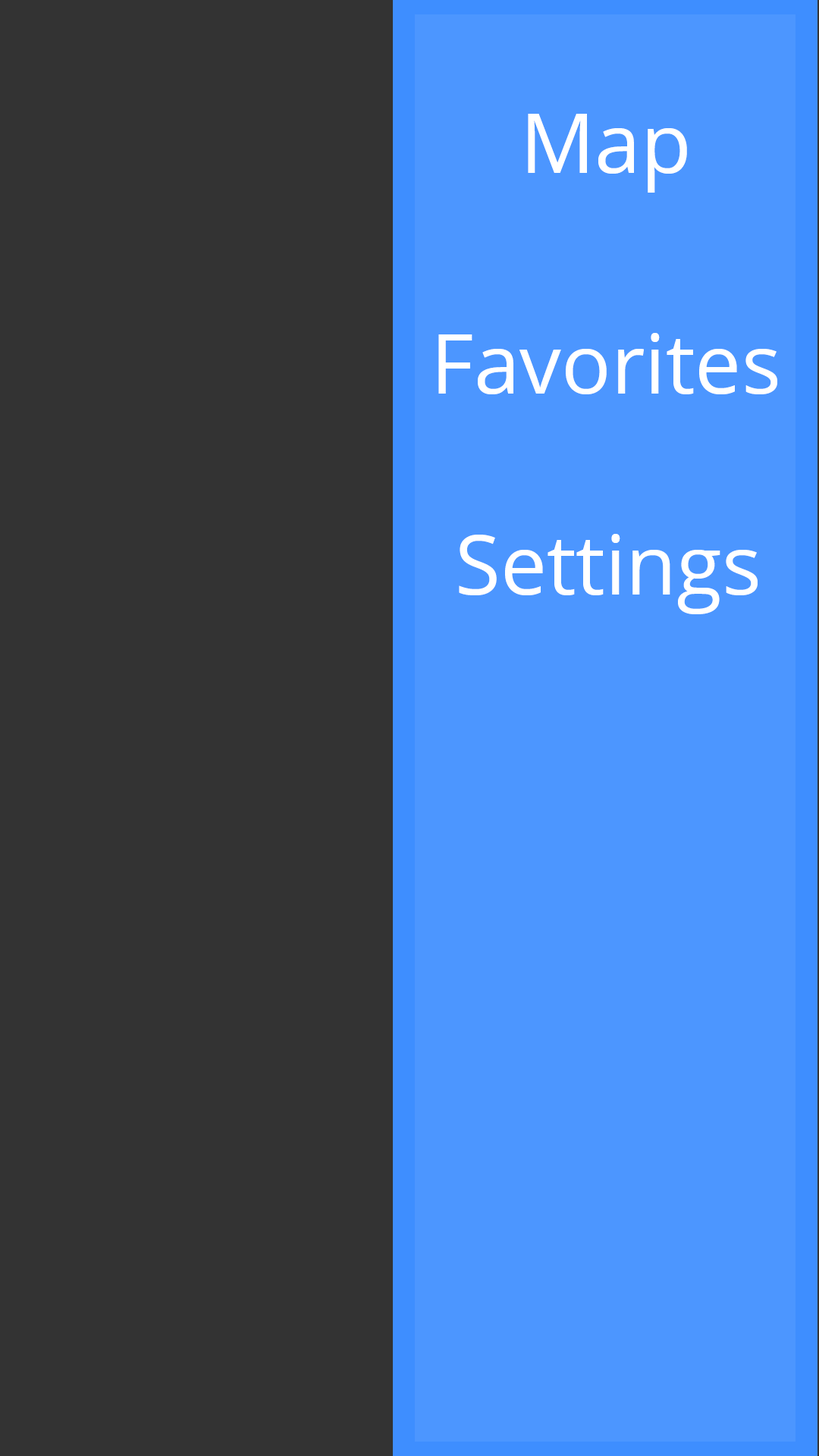
<style>
.page{position:relative;width:819px;height:1456px;background:#333333}
.page>*{position:absolute;margin:0}
.t1{font:82.7px "OpenSans";color:#ffffff}
</style>
<div class="page">
<p class="t1" style="left:528px;top:114px;width:159px;height:79px">Map</p>
<p class="t1" style="left:438px;top:333px;width:339px;height:61px">Favorites</p>
<p class="t1" style="left:459px;top:534px;width:299px;height:80px">Settings</p>
</div>
